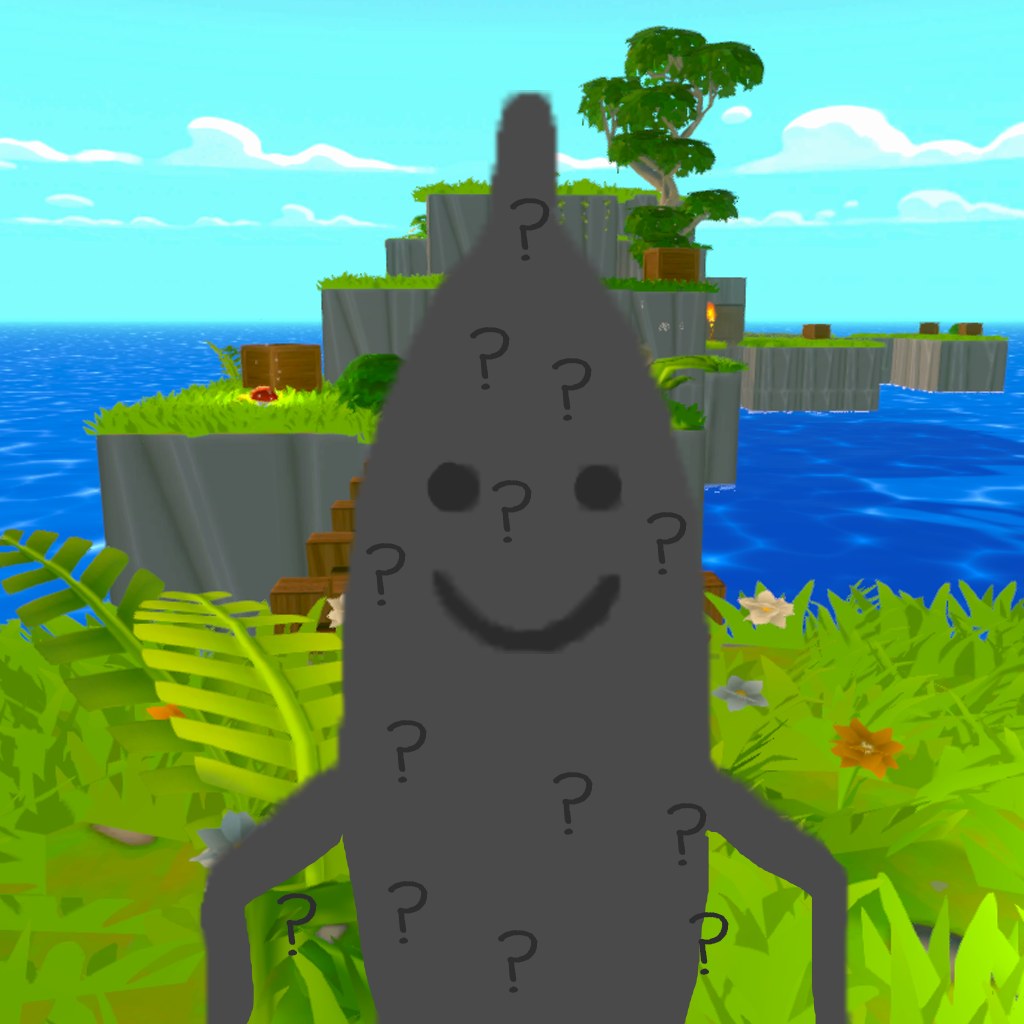
<style>
.page{position:relative;width:1024px;height:1024px;background:#4a4a4a}
.page>*{position:absolute;margin:0}
.t1{font:100px "Unkempt";color:#2d2d2d}
</style>
<div class="page">
<p class="t1" style="left:510px;top:198px;width:40px;height:63px">?</p>
<p class="t1" style="left:470px;top:327px;width:40px;height:63px">?</p>
<p class="t1" style="left:552px;top:358px;width:40px;height:63px">?</p>
<p class="t1" style="left:492px;top:480px;width:40px;height:63px">?</p>
<p class="t1" style="left:647px;top:512px;width:40px;height:63px">?</p>
<p class="t1" style="left:366px;top:543px;width:40px;height:63px">?</p>
<p class="t1" style="left:387px;top:720px;width:40px;height:63px">?</p>
<p class="t1" style="left:553px;top:772px;width:40px;height:63px">?</p>
<p class="t1" style="left:667px;top:803px;width:40px;height:63px">?</p>
<p class="t1" style="left:388px;top:881px;width:40px;height:63px">?</p>
<p class="t1" style="left:277px;top:893px;width:40px;height:63px">?</p>
<p class="t1" style="left:689px;top:912px;width:40px;height:63px">?</p>
<p class="t1" style="left:498px;top:930px;width:40px;height:63px">?</p>
</div>
